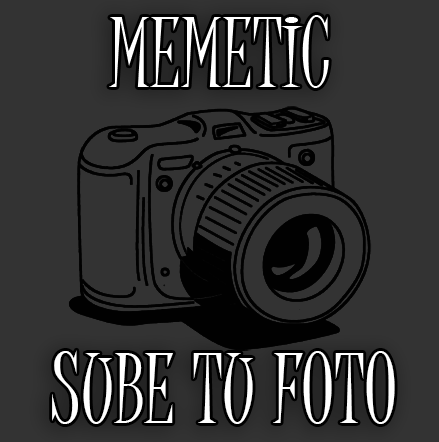
<style>
.page{position:relative;width:439px;height:442px;background:#333333}
.page>*{position:absolute;margin:0}
.t1{font:94px "JuiceITC-Regular";color:#ffffff}
</style>
<div class="page">
<p class="t1" style="left:52px;top:350px;width:343px;height:74px">SUBE TU FOTO</p>
</div>
